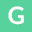
<style>
.page{position:relative;width:32px;height:32px;background:#57d29d}
.page>*{position:absolute;margin:0}
.t1{font:24px "Lato-Bold";letter-spacing:0.05em;color:#ffffff}
</style>
<div class="page">
<p class="t1" style="left:8px;top:6px;width:16px;height:19px">G</p>
</div>
